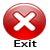
<style>
.page{position:relative;width:50px;height:50px;background:#ffffff}
.page>*{position:absolute;margin:0}
.t1{font:10.1px "MyriadPro-Regular";color:#000000;scale:1.53 1}
</style>
<div class="page">
<p class="t1" style="left:14px;top:40px;width:23px;height:7px">Exit</p>
</div>
